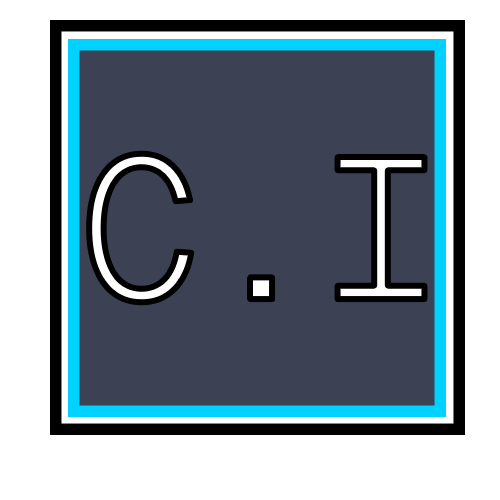
<style>
.page{position:relative;width:500px;height:500px;background:#3c4153}
.page>*{position:absolute;margin:0}
.t1{font:200px "GeistMono-Light"}
</style>
<div class="page">
<p class="t1" style="left:89px;top:153px;width:336px;height:150px">C.I</p>
</div>
